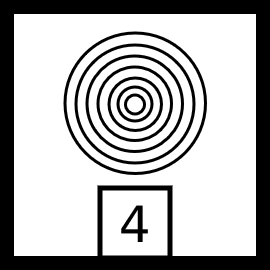
<style>
.page{position:relative;width:270px;height:270px;background:#ffffff}
.page>*{position:absolute;margin:0}
.t1{font:50px "DejaVuSans";color:#000000}
</style>
<div class="page">
<p class="t1" style="left:121px;top:205px;width:27px;height:37px">4</p>
</div>
